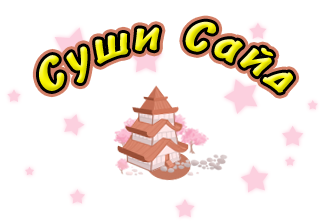
<style>
.page{position:relative;width:320px;height:221px;background:#ffffff}
.page>*{position:absolute;margin:0}
.t1{font:48px "BrushType-Bold";letter-spacing:0.075em;font-style:italic}
</style>
<div class="page">
<p class="t1" style="left:39px;top:21px;width:254px;height:72px">Ñóøè Ñàéä</p>
</div>
